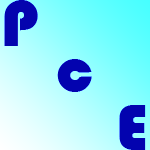
<style>
.page{position:relative;width:150px;height:150px}
.page>*{position:absolute;margin:0}
.t1{font:66.7px "Bauhaus93";color:#0404ae}
.t2{font:66.7px "Bauhaus93";color:#0303af}
</style>
<div class="page">
<p class="t1" style="left:4px;top:0px;width:34px;height:46px">P</p>
<p class="t2" style="left:57px;top:59px;width:35px;height:33px">c</p>
<p class="t2" style="left:119px;top:105px;width:27px;height:45px">E</p>
</div>
